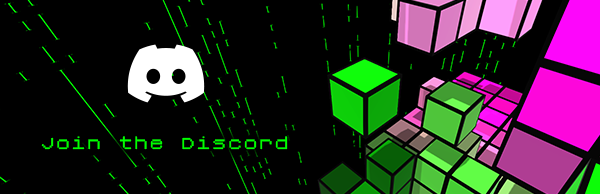
<style>
.page{position:relative;width:600px;height:194px;background:#000000}
.page>*{position:absolute;margin:0}
.t1{font:25px "Roentgen-NBP";color:#00ff00}
</style>
<div class="page">
<p class="t1" style="left:41px;top:136px;width:247px;height:14px">Join the Discord</p>
</div>
